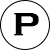
<style>
.page{position:relative;width:50px;height:50px;background:#ffffff}
.page>*{position:absolute;margin:0}
.t1{font:41.7px "Copperplate";color:#010101;text-transform:uppercase;font-weight:bold}
</style>
<div class="page">
<p class="t1" style="left:14px;top:13px;width:25px;height:23px">p</p>
</div>
